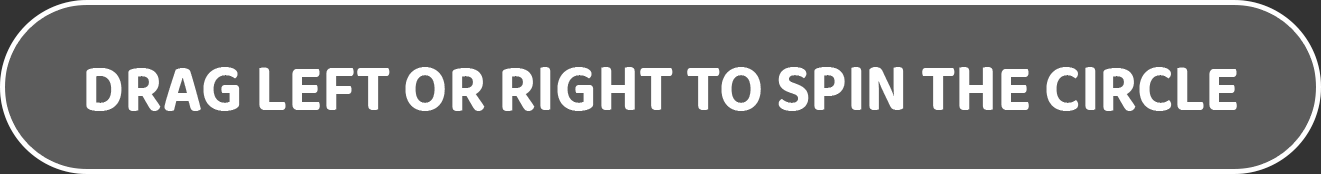
<style>
.page{position:relative;width:1321px;height:174px;background:#5c5c5c}
.page>*{position:absolute;margin:0}
.t1{font:69px "BalooThambi2-Bold";color:#ffffff;scale:0.91 1}
</style>
<div class="page">
<p class="t1" style="left:86px;top:67px;width:1151px;height:44px">DRAG LEFT OR RIGHT TO SPIN THE CIRCLE</p>
</div>
